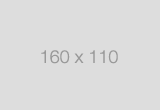
<style>
.page{position:relative;width:160px;height:110px;background:#dddddd}
.page>*{position:absolute;margin:0}
.t1{font:18px "HelveticaNeue-Light";color:#999999}
</style>
<div class="page">
<p class="t1" style="left:41px;top:50px;width:77px;height:14px">160 x 110</p>
</div>
